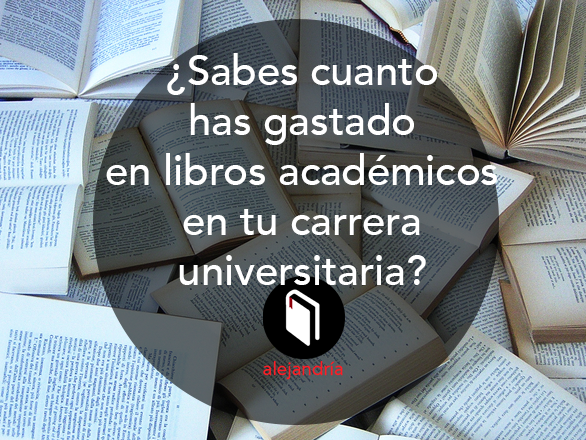
<style>
.page{position:relative;width:586px;height:440px}
.page>*{position:absolute;margin:0}
.t1{font:41.7px "Avenir-Medium";color:#ffffff}
</style>
<div class="page">
<p class="t1" style="left:106px;top:53px;width:391px;height:232px;text-align:center">¿Sabes cuanto<br> has gastado <br>en libros académicos<br> en tu carrera <br>universitaria?</p>
</div>
